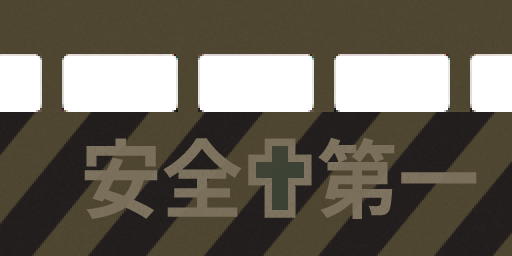
<style>
.page{position:relative;width:512px;height:256px}
.page>*{position:absolute;margin:0}
.t1{font:85.8px "SourceHanSans-Bold";color:#7d735f;scale:0.95 1}
</style>
<div class="page">
<p class="t1" style="left:84px;top:137px;width:393px;height:82px">安全    第一</p>
</div>
